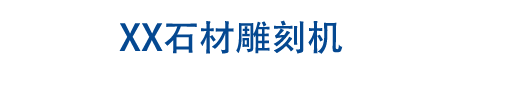
<style>
.page{position:relative;width:522px;height:100px;background:#ffffff}
.page>*{position:absolute;margin:0}
.t1{font:36px "AdobeHeitiStd-Regular";color:#044891}
</style>
<div class="page">
<p class="t1" style="left:119px;top:20px;width:224px;height:34px">XX石材雕刻机</p>
</div>
